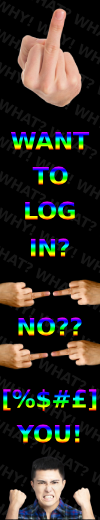
<style>
.page{position:relative;width:100px;height:520px;background:#000000}
.page>*{position:absolute;margin:0}
.t1{font:24px "MontserratRoman-ExtraBold";letter-spacing:-0.02em;text-transform:uppercase}
</style>
<div class="page">
<p class="t1" style="left:10px;top:131px;width:80px;height:19px">want</p>
<p class="t1" style="left:32px;top:166px;width:36px;height:19px">to</p>
<p class="t1" style="left:25px;top:201px;width:50px;height:19px">log</p>
<p class="t1" style="left:30px;top:238px;width:40px;height:19px">in?</p>
<p class="t1" style="left:18px;top:317px;width:64px;height:19px">no??</p>
<p class="t1" style="left:3px;top:389px;width:94px;height:22px">[%$#£]</p>
<p class="t1" style="left:16px;top:424px;width:64px;height:19px">you!</p>
</div>
